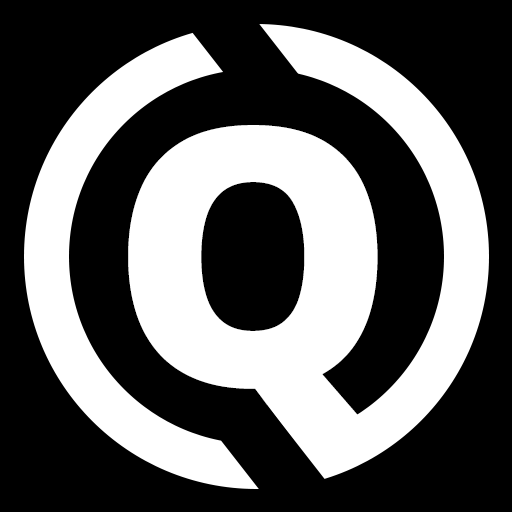
<style>
.page{position:relative;width:512px;height:512px;background:#000000}
.page>*{position:absolute;margin:0}
.t1{font:358.8px "OpenSans-ExtraBold";color:#ffffff}
</style>
<div class="page">
<p class="t1" style="left:128px;top:125px;width:257px;height:322px">Q</p>
</div>
